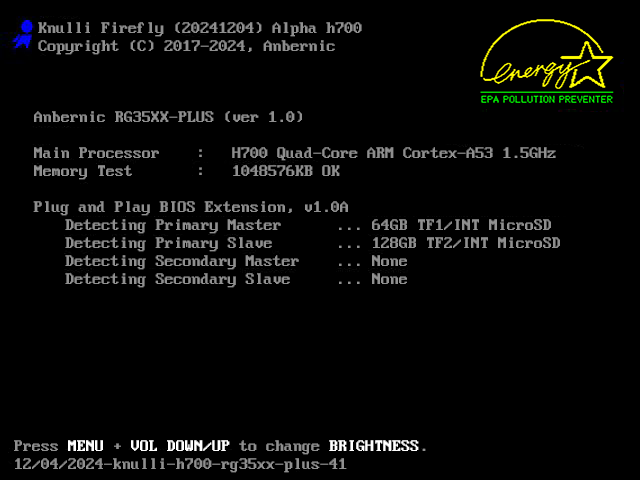
<style>
.page{position:relative;width:640px;height:480px;background:#000000}
.page>*{position:absolute;margin:0}
.t1{font:17px "PxPlus_IBM_VGA8";color:#8f8f8f;scale:1.06 1}
.t2{font:17px "PxPlus_IBM_VGA8";color:#ffffff;scale:1.06 1}
</style>
<div class="page">
<p class="t1" style="left:38px;top:22px;width:324px;height:15px">Knulli Firefly (20241204) Alpha h700</p>
<p class="t1" style="left:38px;top:40px;width:297px;height:15px">Copyright (C) 2017-2024, Anbernic</p>
<p class="t1" style="left:34px;top:111px;width:268px;height:11px">Anbernic RG35XX-PLUS (ver 1.0)</p>
<p class="t1" style="left:34px;top:147px;width:522px;height:14px">Main Processor    :   H700 Quad-Core ARM Cortex-A53 1.5GHz</p>
<p class="t1" style="left:34px;top:165px;width:306px;height:15px">Memory Test       :   1048576KB OK</p>
<p class="t1" style="left:33px;top:201px;width:315px;height:15px">Plug and Play BIOS Extension, v1.0A</p>
<p class="t1" style="left:65px;top:219px;width:486px;height:15px">Detecting Primary Master      ... 64GB TF1/INT MicroSD</p>
<p class="t1" style="left:65px;top:237px;width:495px;height:15px">Detecting Primary Slave       ... 128GB TF2/INT MicroSD</p>
<p class="t1" style="left:65px;top:255px;width:342px;height:15px">Detecting Secondary Master    ... None</p>
<p class="t1" style="left:65px;top:273px;width:342px;height:15px">Detecting Secondary Slave     ... None</p>
<p class="t2" style="left:14px;top:440px;width:412px;height:15px"><span class="t1">Press </span>MENU<span class="t1"> + </span>VOL DOWN/UP<span class="t1"> to change </span>BRIGHTNESS<span class="t1">.</span></p>
<p class="t1" style="left:15px;top:458px;width:332px;height:15px">12/04/2024-knulli-h700-rg35xx-plus-41</p>
</div>
